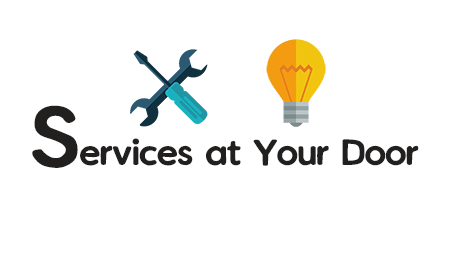
<style>
.page{position:relative;width:452px;height:276px;background:#ffffff}
.page>*{position:absolute;margin:0}
.t1{font:30px "VanillaExtractRegular";color:#221f1f}
.t2{font:72px "VanillaExtractRegular";color:#221f1f}
</style>
<div class="page">
<p class="t1" style="left:32px;top:105px;width:387px;height:63px"><span class="t2">S</span>ervices at Your Door</p>
</div>
